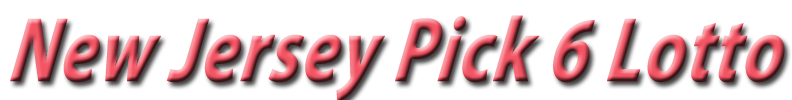
<style>
.page{position:relative;width:792px;height:100px;background:#ffffff}
.page>*{position:absolute;margin:0}
.t1{font:92px "MyriadPro-BoldIt";font-weight:bold;font-style:italic;scale:0.79 1}
</style>
<div class="page">
<p class="t1" style="left:10px;top:15px;width:775px;height:87px">New Jersey Pick 6 Lotto</p>
</div>
